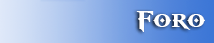
<style>
.page{position:relative;width:214px;height:43px}
.page>*{position:absolute;margin:0}
.t1{font:26px "GodOfWar";color:#ffffff}
</style>
<div class="page">
<p class="t1" style="left:136px;top:11px;width:69px;height:21px">Foro</p>
</div>
